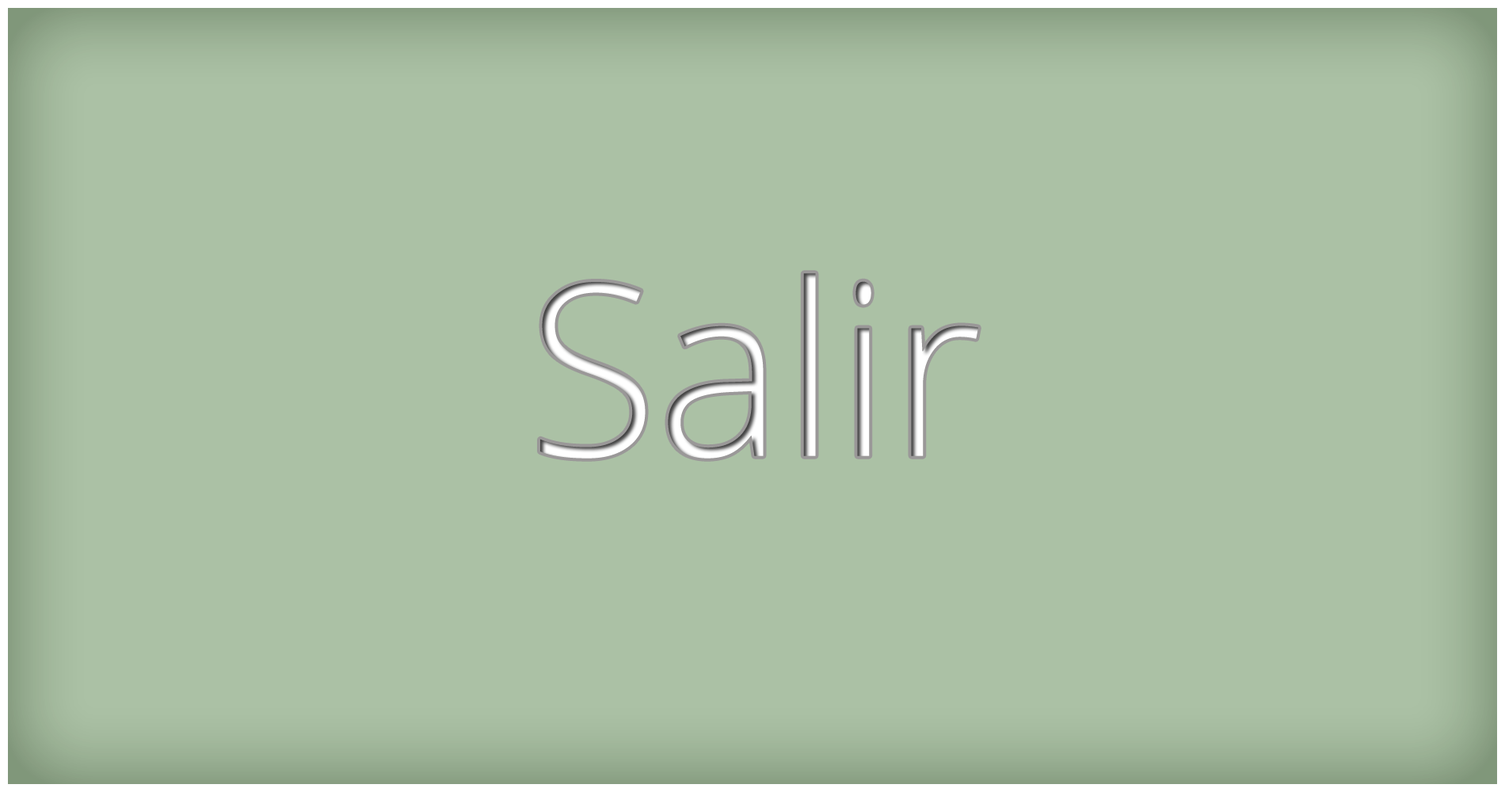
<style>
.page{position:relative;width:1505px;height:792px;background:#abc1a5}
.page>*{position:absolute;margin:0}
.t1{font:240.2px "OpenSans-Light"}
</style>
<div class="page">
<p class="t1" style="left:540px;top:273px;width:438px;height:186px">Salir</p>
</div>
